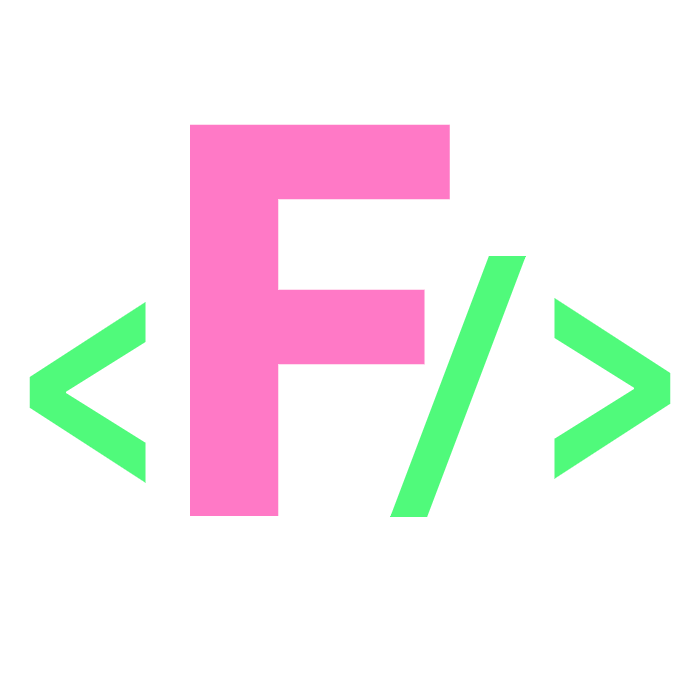
<style>
.page{position:relative;width:691px;height:691px;background:#ffffff}
.page>*{position:absolute;margin:0}
.t1{font:600px "SourceCodePro-Bold";color:#ff79c6}
.t2{font:200px "SourceCodePro-Bold";color:#50fa7b}
.t3{font:300px "SourceCodePro-Bold";color:#50fa7b}
</style>
<div class="page">
<p class="t1" style="left:189px;top:124px;width:261px;height:392px"><span class="t2"> </span>F</p>
<p class="t3" style="left:390px;top:256px;width:136px;height:261px">/</p>
<p class="t3" style="left:29px;top:302px;width:117px;height:181px">&lt;</p>
<p class="t3" style="left:554px;top:298px;width:117px;height:181px">&gt;</p>
</div>
